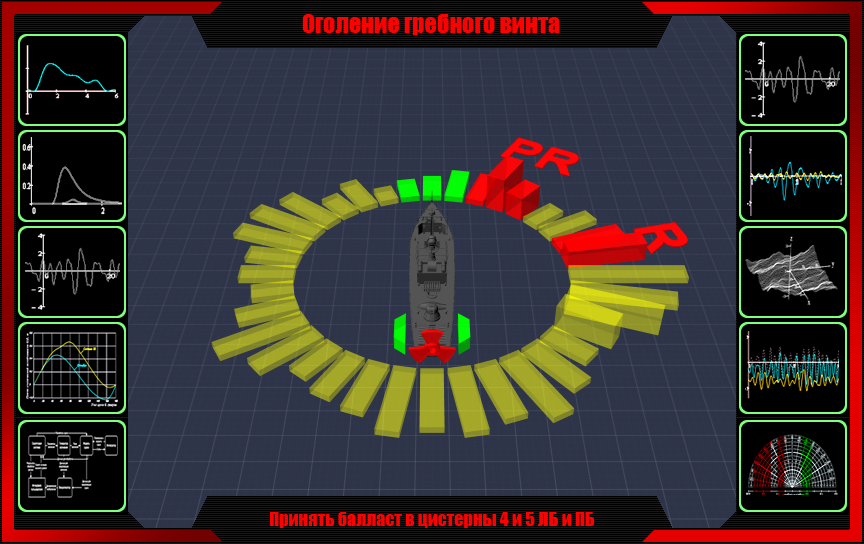
<style>
.page{position:relative;width:864px;height:544px;background:#000000}
.page>*{position:absolute;margin:0}
.t1{font:24px "Impact";color:#ff0000}
.t2{font:18px "Impact";color:#ff0000}
</style>
<div class="page">
<p class="t1" style="left:302px;top:14px;width:258px;height:21px">Оголение гребного винта</p>
<p class="t2" style="left:270px;top:512px;width:325px;height:16px">Принять балласт в цистерны 4 и 5 ЛБ и ПБ</p>
</div>
